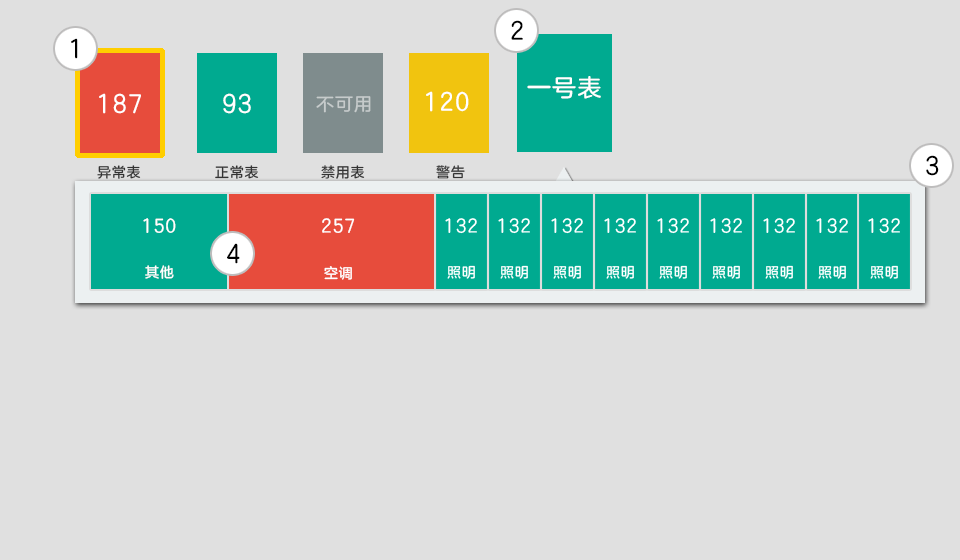
<style>
.page{position:relative;width:960px;height:560px;background:#e0e0e0}
.page>*{position:absolute;margin:0}
.t1{font:24px "FZLANTY_ZHUNJW--GB1-0";letter-spacing:0.05em;color:#000000}
.t2{font:24px "FZLANTY_ZHUNJW--GB1-0";letter-spacing:0.05em;color:#ffffff}
.t3{font:18px "FZLANTY_ZHUNJW--GB1-0";letter-spacing:0.05em;color:#c6cbcb}
.t4{font:14px "FZLANTY_ZHUNJW--GB1-0";letter-spacing:0.05em;color:#333333}
.t5{font:18px "FZLANTY_ZHUNJW--GB1-0";letter-spacing:0.05em;color:#ffffff}
.t6{font:14px "FZLANTY_ZHUNJW--GB1-0";letter-spacing:0.05em;color:#ffffff}
</style>
<div class="page">
<p class="t1" style="left:511px;top:20px;width:12px;height:20px">2</p>
<p class="t1" style="left:71px;top:38px;width:7px;height:21px">1</p>
<p class="t2" style="left:527px;top:76px;width:74px;height:23px">一号表</p>
<p class="t2" style="left:99px;top:93px;width:42px;height:21px">187</p>
<p class="t2" style="left:223px;top:93px;width:28px;height:21px">93</p>
<p class="t3" style="left:316px;top:96px;width:55px;height:17px">不可用</p>
<p class="t2" style="left:426px;top:91px;width:43px;height:21px">120</p>
<p class="t1" style="left:926px;top:155px;width:13px;height:21px">3</p>
<p class="t4" style="left:97px;top:165px;width:44px;height:14px">异常表</p>
<p class="t4" style="left:215px;top:165px;width:44px;height:14px">正常表</p>
<p class="t4" style="left:321px;top:165px;width:44px;height:14px">禁用表</p>
<p class="t4" style="left:436px;top:165px;width:29px;height:14px">警告</p>
<p class="t5" style="left:143px;top:218px;width:33px;height:15px">150</p>
<p class="t5" style="left:322px;top:218px;width:33px;height:15px">257</p>
<p class="t1" style="left:227px;top:243px;width:13px;height:21px">4</p>
<p class="t6" style="left:145px;top:265px;width:29px;height:14px">其他</p>
<p class="t6" style="left:324px;top:266px;width:28px;height:14px">空调</p>
</div>
